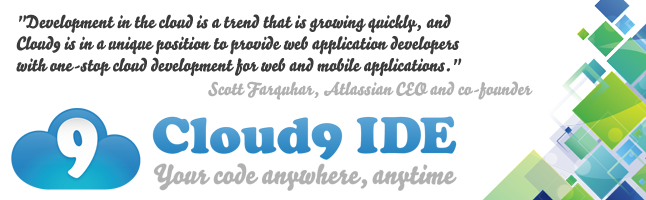
<style>
.page{position:relative;width:646px;height:200px;background:#ffffff}
.page>*{position:absolute;margin:0}
.t1{font:18px "Bello-Script";color:#3b3b3b}
.t2{font:18px "Bello-Script";color:#b2b1b1}
</style>
<div class="page">
<p class="t1" style="left:16px;top:14px;width:446px;height:62px">"Development in the cloud is a trend that is growing quickly, and <br>Cloud9 is in a unique position to provide web application developers <br>with one-stop cloud development for web and mobile applications."</p>
<p class="t2" style="left:208px;top:81px;width:325px;height:19px">Scott Farquhar, Atlassian CEO and co-founder</p>
</div>
